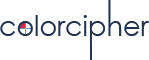
<style>
.page{position:relative;width:149px;height:60px;background:#ffffff}
.page>*{position:absolute;margin:0}
.t1{font:28.4px "CenturyGothic";color:#1f3250;scale:0.95 1}
</style>
<div class="page">
<p class="t1" style="left:0px;top:15px;width:149px;height:26px">colorcipher</p>
</div>
